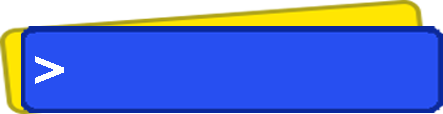
<style>
.page{position:relative;width:443px;height:114px;background:#274ff1}
.page>*{position:absolute;margin:0}
.t1{font:45.1px "Tahoma-Bold";color:#ffffff;scale:1.03 1}
</style>
<div class="page">
<p class="t1" style="left:35px;top:56px;width:29px;height:28px">&gt;</p>
</div>
